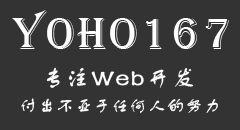
<style>
.page{position:relative;width:240px;height:130px;background:#333333}
.page>*{position:absolute;margin:0}
.t1{font:46px "Algerian";letter-spacing:0.07em;color:#fefefe}
.t2{font:23.7px "FZSTK--GBK1-0";letter-spacing:0.07em;color:#fefefe;font-weight:bold}
.t3{font:23.7px "FZSTK--GBK1-0";letter-spacing:0.07em;color:#fefefe}
.t4{font:17.2px "FZSTK--GBK1-0";letter-spacing:0.07em;color:#fefefe}
</style>
<div class="page">
<p class="t1" style="left:12px;top:10px;width:217px;height:39px">yoho167</p>
<p class="t2" style="left:46px;top:67px;width:148px;height:21px"><span class="t3">专注</span>Web<span class="t3">开发</span></p>
<p class="t4" style="left:21px;top:98px;width:197px;height:16px">付出不亚于任何人的努力</p>
</div>
